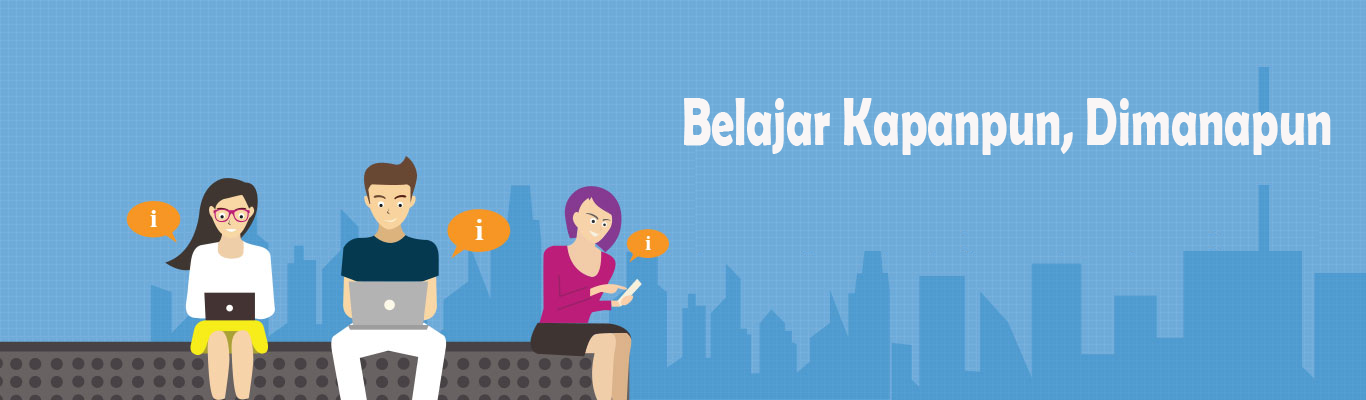
<style>
.page{position:relative;width:1366px;height:400px}
.page>*{position:absolute;margin:0}
.t1{font:68px "BerlinSansFBDemi-Bold";color:#f9f6f6;scale:0.68 1}
</style>
<div class="page">
<p class="t1" style="left:684px;top:98px;width:647px;height:57px">Belajar Kapanpun, Dimanapun</p>
</div>
